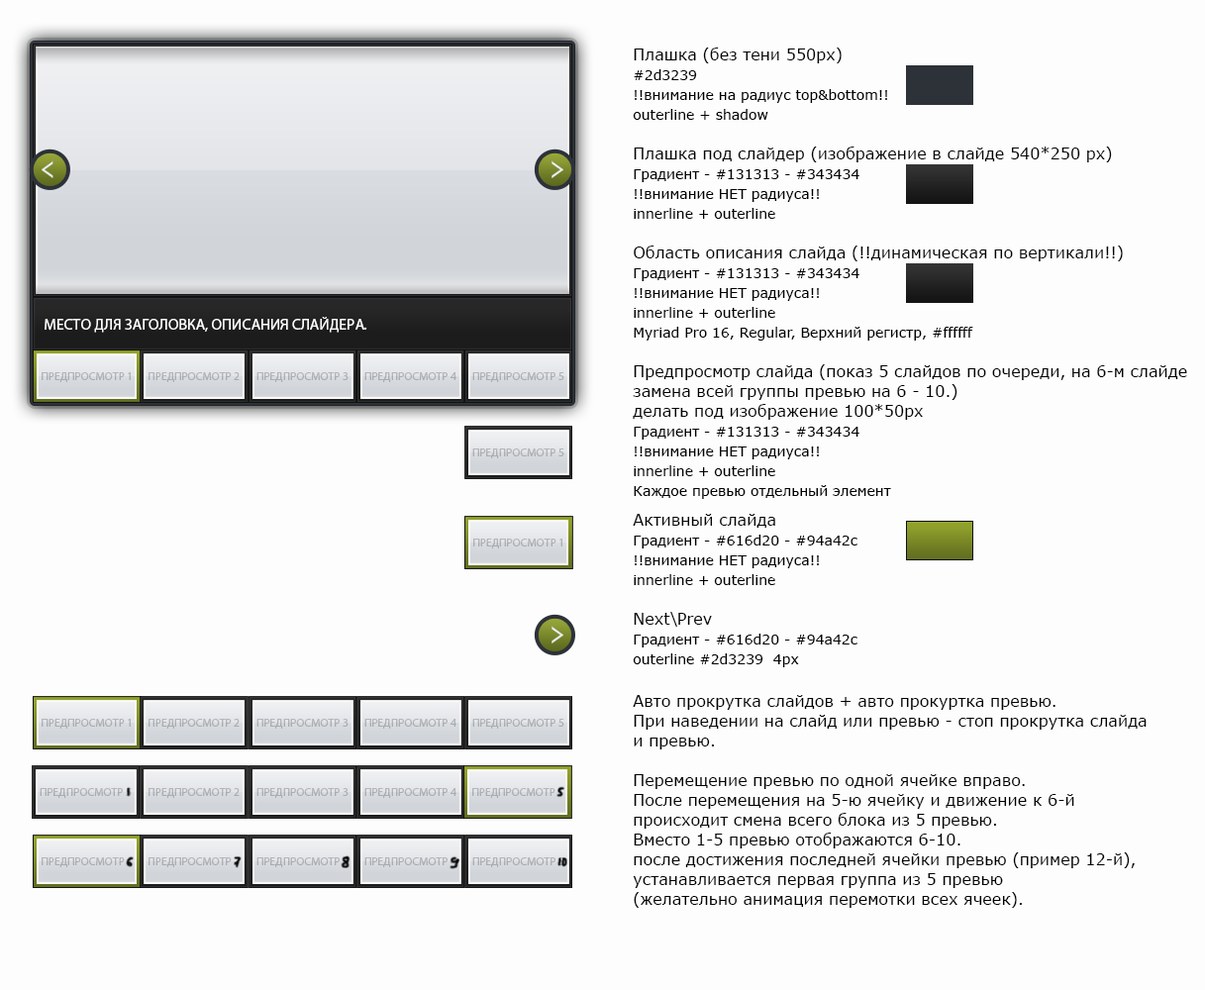
<style>
.page{position:relative;width:1205px;height:990px;background:#fdfdfd}
.page>*{position:absolute;margin:0}
.t1{font:13.9px/19.8px "Verdana";color:#010101}
.t2{font:15.8px/19.8px "Verdana";color:#010101}
.t3{font:15.4px "MyriadPro-Regular";color:#ffffff;text-transform:uppercase}
</style>
<div class="page">
<p class="t1" style="left:633px;top:48px;width:254px;height:72px"><span class="t2">Плашка (без тени 550px)<br></span>#2d3239<br>!!внимание на радиус top&amp;bottom!!<br>outerline + shadow</p>
<p class="t1" style="left:634px;top:146px;width:478px;height:73px"><span class="t2">Плашка под слайдер (изображение в слайде 540*250 px)<br></span>Градиент - #131313 - #343434<br>!!внимание НЕТ радиуса!!<br>innerline + outerline</p>
<p class="t1" style="left:634px;top:245px;width:488px;height:96px"><span class="t2">Область описания слайда (!!динамическая по вертикали!!)<br></span>Градиент - #131313 - #343434<br>!!внимание НЕТ радиуса!!<br>innerline + outerline<br>Myriad Pro 16, Regular, Верхний регистр, #ffffff</p>
<p class="t3" style="left:45px;top:317px;width:322px;height:16px">Место для заголовка, описания слайдера.</p>
<p class="t2" style="left:633px;top:364px;width:554px;height:135px">Предпросмотр слайда (показ 5 слайдов по очереди, на 6-м слайде <br>замена всей группы превью на 6 - 10.)<br>делать под изображение 100*50px<br><span class="t1">Градиент - #131313 - #343434<br>!!внимание НЕТ радиуса!!<br>innerline + outerline<br>Каждое превью отдельный элемент</span></p>
<p class="t1" style="left:633px;top:514px;width:224px;height:71px"><span class="t2">Активный слайда <br></span>Градиент - #616d20 - #94a42c<br>!!внимание НЕТ радиуса!!<br>innerline + outerline</p>
<p class="t1" style="left:633px;top:612px;width:224px;height:55px"><span class="t2">Next\Prev<br></span>Градиент - #616d20 - #94a42c<br>outerline #2d3239  4px</p>
<p class="t2" style="left:633px;top:695px;width:513px;height:54px">Авто прокрутка слайдов + авто прокуртка превью.<br>При наведении на слайд или превью - стоп прокрутка слайда<br>и превью.</p>
<p class="t2" style="left:633px;top:774px;width:501px;height:134px">Перемещение превью по одной ячейке вправо.<br>После перемещения на 5-ю ячейку и движение к 6-й<br>происходит смена всего блока из 5 превью.<br>Вместо 1-5 превью отображаются 6-10.<br>после достижения последней ячейки превью (пример 12-й),<br>устанавливается первая группа из 5 превью <br>(желательно анимация перемотки всех ячеек).</p>
</div>
